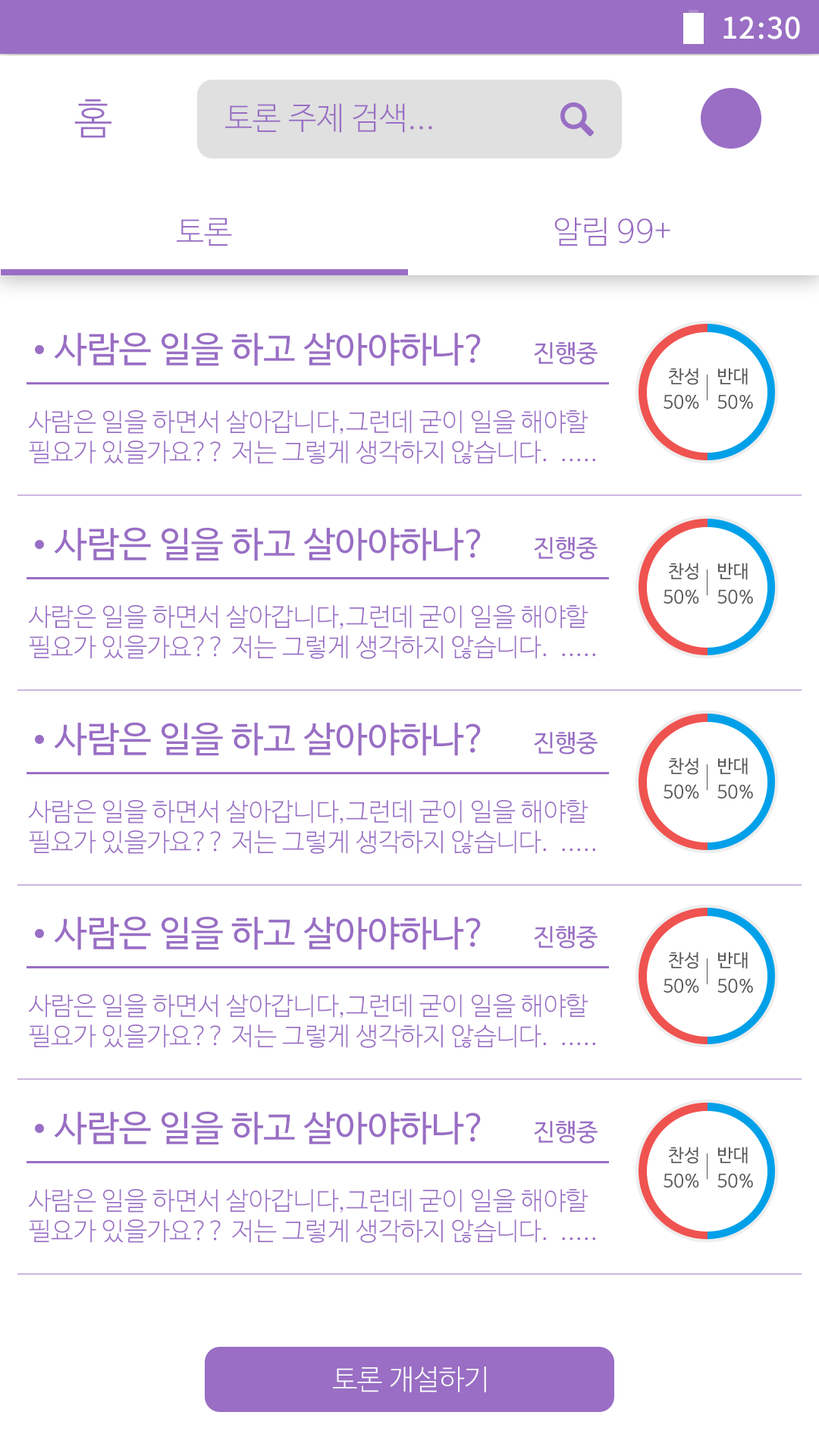
<style>
.page{position:relative;width:819px;height:1456px;background:#ffffff}
.page>*{position:absolute;margin:0}
.t1{font:29.6px "NotoSansCJKkr-Medium";letter-spacing:0.029em;color:#ffffff}
.t2{font:42.3px "NanumBarunGothicLight";color:#996ec4}
.t3{font:31.6px "NanumBarunGothicLight";color:#996ec4}
.t4{font:35.9px "NanumBarunGothic";color:#996ec4}
.t5{font:24px "NanumBarunGothic";color:#996ec4}
.t6{font:18px "NanumBarunGothic";color:#565656}
.t7{font:25.3px "NanumBarunGothicLight";color:#996ec4}
.t8{font:28.2px "NanumBarunGothicLight";color:#ffffff}
</style>
<div class="page">
<p class="t1" style="left:723px;top:16px;width:77px;height:23px">12:30</p>
<p class="t2" style="left:74px;top:99px;width:37px;height:39px">홈</p>
<p class="t3" style="left:225px;top:103px;width:207px;height:30px">토론 주제 검색...</p>
<p class="t3" style="left:177px;top:218px;width:55px;height:28px">토론</p>
<p class="t3" style="left:554px;top:217px;width:116px;height:29px">알림 99+</p>
<p class="t4" style="left:54px;top:332px;width:427px;height:34px">사람은 일을 하고 살아야하나?</p>
<p class="t5" style="left:534px;top:342px;width:64px;height:23px">진행중</p>
<p class="t6" style="left:668px;top:368px;width:30px;height:17px">찬성</p>
<p class="t6" style="left:718px;top:368px;width:30px;height:17px">반대</p>
<p class="t6" style="left:664px;top:394px;width:35px;height:15px">50%</p>
<p class="t6" style="left:717px;top:394px;width:36px;height:15px">50%</p>
<p class="t7" style="left:28px;top:410px;width:567px;height:54px">사람은 일을 하면서 살아갑니다,그런데 굳이 일을 해야할 필요가 있을가요?? 저는 그렇게 생각하지 않습니다.  .....</p>
<p class="t4" style="left:54px;top:527px;width:427px;height:34px">사람은 일을 하고 살아야하나?</p>
<p class="t5" style="left:534px;top:537px;width:64px;height:23px">진행중</p>
<p class="t6" style="left:668px;top:563px;width:30px;height:17px">찬성</p>
<p class="t6" style="left:718px;top:563px;width:30px;height:17px">반대</p>
<p class="t6" style="left:664px;top:589px;width:35px;height:15px">50%</p>
<p class="t6" style="left:717px;top:589px;width:36px;height:15px">50%</p>
<p class="t7" style="left:28px;top:605px;width:567px;height:54px">사람은 일을 하면서 살아갑니다,그런데 굳이 일을 해야할 필요가 있을가요?? 저는 그렇게 생각하지 않습니다.  .....</p>
<p class="t4" style="left:54px;top:722px;width:427px;height:34px">사람은 일을 하고 살아야하나?</p>
<p class="t5" style="left:534px;top:732px;width:64px;height:23px">진행중</p>
<p class="t6" style="left:668px;top:758px;width:30px;height:17px">찬성</p>
<p class="t6" style="left:718px;top:758px;width:30px;height:17px">반대</p>
<p class="t6" style="left:664px;top:784px;width:35px;height:15px">50%</p>
<p class="t6" style="left:717px;top:784px;width:36px;height:15px">50%</p>
<p class="t7" style="left:28px;top:800px;width:567px;height:54px">사람은 일을 하면서 살아갑니다,그런데 굳이 일을 해야할 필요가 있을가요?? 저는 그렇게 생각하지 않습니다.  .....</p>
<p class="t4" style="left:54px;top:916px;width:427px;height:34px">사람은 일을 하고 살아야하나?</p>
<p class="t5" style="left:534px;top:926px;width:64px;height:23px">진행중</p>
<p class="t6" style="left:668px;top:952px;width:30px;height:17px">찬성</p>
<p class="t6" style="left:718px;top:952px;width:30px;height:17px">반대</p>
<p class="t6" style="left:664px;top:978px;width:35px;height:15px">50%</p>
<p class="t6" style="left:717px;top:978px;width:36px;height:15px">50%</p>
<p class="t7" style="left:28px;top:994px;width:567px;height:54px">사람은 일을 하면서 살아갑니다,그런데 굳이 일을 해야할 필요가 있을가요?? 저는 그렇게 생각하지 않습니다.  .....</p>
<p class="t4" style="left:54px;top:1111px;width:427px;height:34px">사람은 일을 하고 살아야하나?</p>
<p class="t5" style="left:534px;top:1121px;width:64px;height:23px">진행중</p>
<p class="t6" style="left:668px;top:1147px;width:30px;height:17px">찬성</p>
<p class="t6" style="left:718px;top:1147px;width:30px;height:17px">반대</p>
<p class="t6" style="left:664px;top:1173px;width:35px;height:15px">50%</p>
<p class="t6" style="left:717px;top:1173px;width:36px;height:15px">50%</p>
<p class="t7" style="left:28px;top:1189px;width:567px;height:54px">사람은 일을 하면서 살아갑니다,그런데 굳이 일을 해야할 필요가 있을가요?? 저는 그렇게 생각하지 않습니다.  .....</p>
<p class="t8" style="left:333px;top:1366px;width:153px;height:26px">토론 개설하기</p>
</div>
